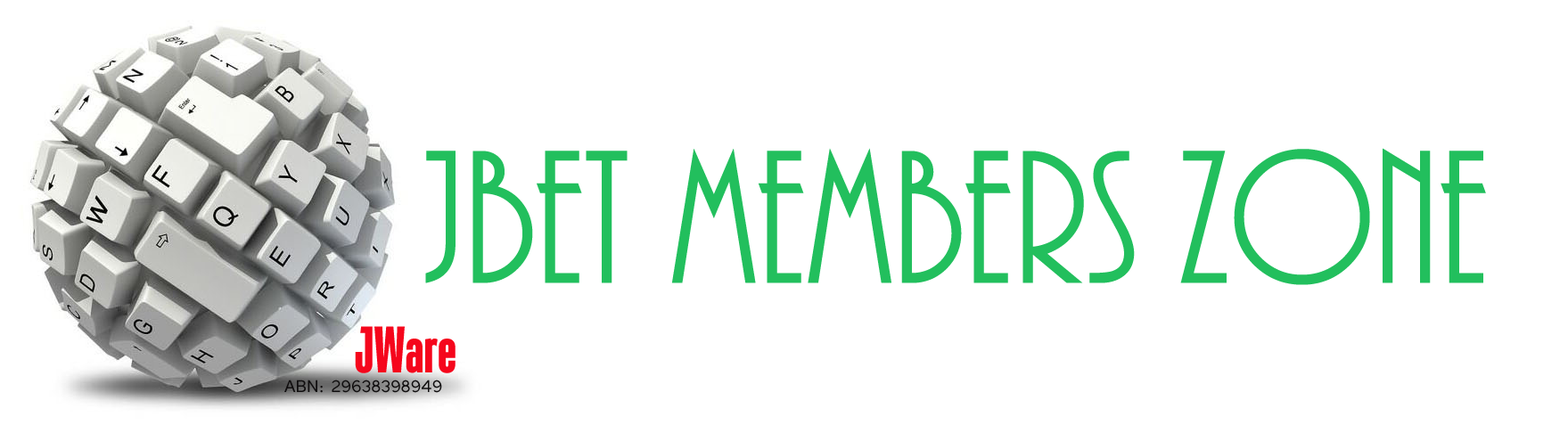
<style>
.page{position:relative;width:1568px;height:433px;background:#ffffff}
.page>*{position:absolute;margin:0}
.t1{font:197.9px "ARBONNIE";color:#22bf5d}
.t2{font:64.2px "Tandelle-Bold";color:#f5061c}
.t3{font:21.4px "Tunga";color:#100e0f}
</style>
<div class="page">
<p class="t1" style="left:425px;top:148px;width:1061px;height:137px">JBet Members Zone</p>
<p class="t2" style="left:355px;top:326px;width:101px;height:48px">JWare</p>
<p class="t3" style="left:284px;top:380px;width:158px;height:13px">ABN: 29638398949</p>
</div>
